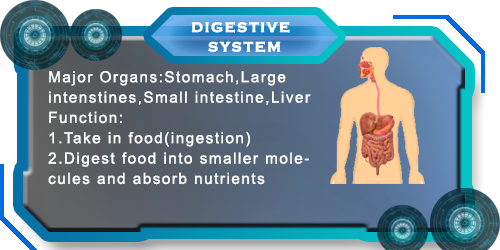
<style>
.page{position:relative;width:500px;height:250px}
.page>*{position:absolute;margin:0}
.t1{font:14px "CopperplateGothic-Bold";letter-spacing:0.1em;color:#ffffff;font-weight:bold}
.t2{font:15.2px/20.3px "ArialMT";letter-spacing:0.1em;color:#ffffff}
</style>
<div class="page">
<p class="t1" style="left:191px;top:21px;width:99px;height:12px">DIGESTIVE</p>
<p class="t1" style="left:208px;top:41px;width:73px;height:12px">SYSTEM</p>
<p class="t2" style="left:48px;top:71px;width:263px;height:114px">Major Organs:Stomach,Large intenstines,Small intestine,Liver<br>Function: <br>1.Take in food(ingestion)<br>2.Digest food into smaller molecules and absorb nutrients</p>
</div>
